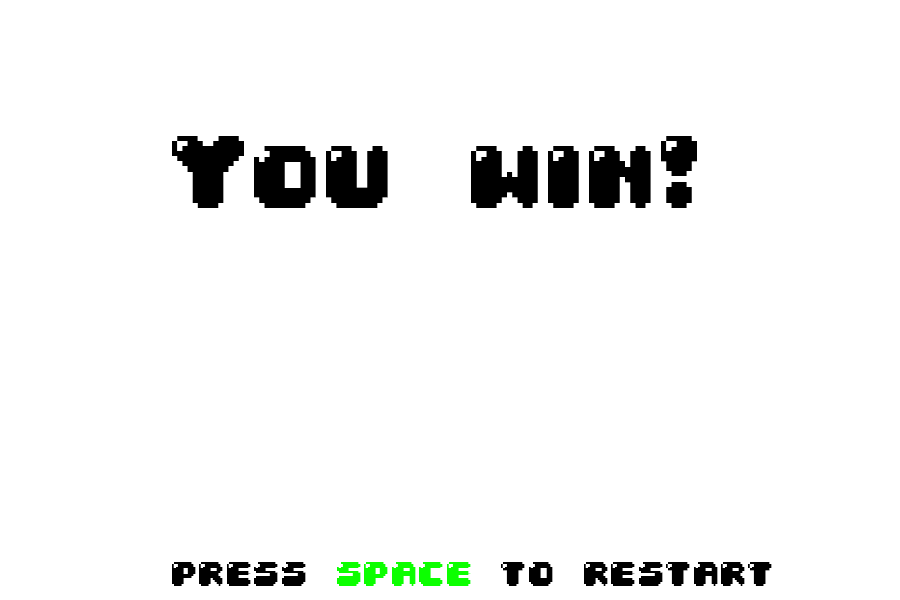
<style>
.page{position:relative;width:900px;height:600px;background:#ffffff}
.page>*{position:absolute;margin:0}
.t1{font:87.5px "04b30";color:#000000}
.t2{font:33.3px "04b30";color:#000000}
.t3{font:33.3px "04b30";color:#0cff00}
</style>
<div class="page">
<p class="t1" style="left:172px;top:136px;width:525px;height:72px">You win!</p>
<p class="t2" style="left:172px;top:562px;width:600px;height:24px">press <span class="t3">space</span> to restart</p>
</div>
